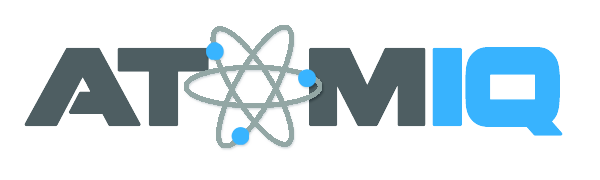
<style>
.page{position:relative;width:600px;height:180px;background:#ffffff}
.page>*{position:absolute;margin:0}
.t1{font:100px "FenixBlackletterCaps";letter-spacing:-0.02em;color:#202728}
.t2{font:100px "FenixBlackletterCaps";letter-spacing:-0.02em;color:#38b3fe}
</style>
<div class="page">
<p class="t1" style="left:24px;top:47px;width:539px;height:89px">AT  M<span class="t2">IQ</span></p>
</div>
